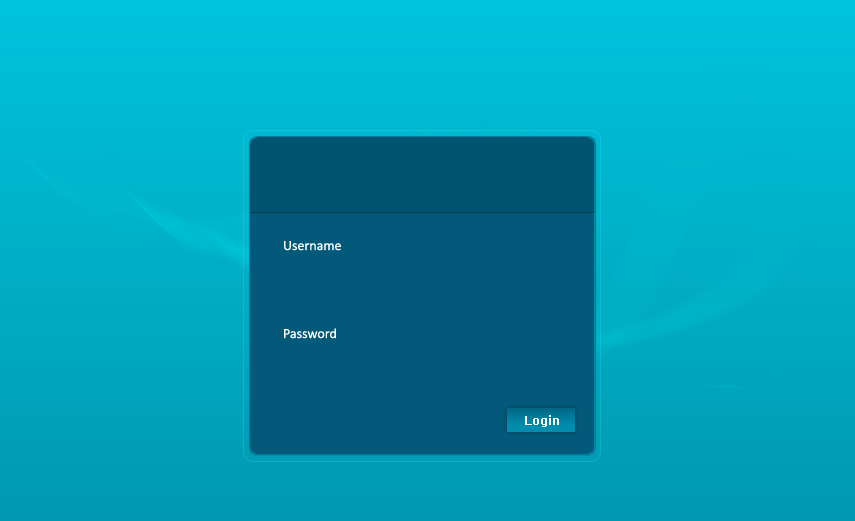
<style>
.page{position:relative;width:855px;height:521px}
.page>*{position:absolute;margin:0}
.t1{font:14px "Calibri";color:#ffffff}
.t2{font:12px "Verdana-Bold";color:#ffffff}
</style>
<div class="page">
<p class="t1" style="left:284px;top:241px;width:57px;height:10px">Username</p>
<p class="t1" style="left:284px;top:328px;width:52px;height:11px">Password</p>
<p class="t2" style="left:525px;top:415px;width:34px;height:12px">Login</p>
</div>
